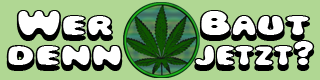
<style>
.page{position:relative;width:320px;height:80px;background:#b0d793}
.page>*{position:absolute;margin:0}
.t1{font:26.4px/30px "MagicalMysteryTourOutlineShadow";color:#000000;scale:1.82 1}
.t2{font:26.4px/30px "MagicalMysteryTourOutlineShadow";color:#000000;scale:1.45 1}
</style>
<div class="page">
<p class="t1" style="left:6px;top:10px;width:117px;height:61px;text-align:center">Wer<br>denn</p>
<p class="t2" style="left:194px;top:10px;width:121px;height:61px;text-align:center"><span class="t1">Baut<br></span>jetzt?</p>
</div>
